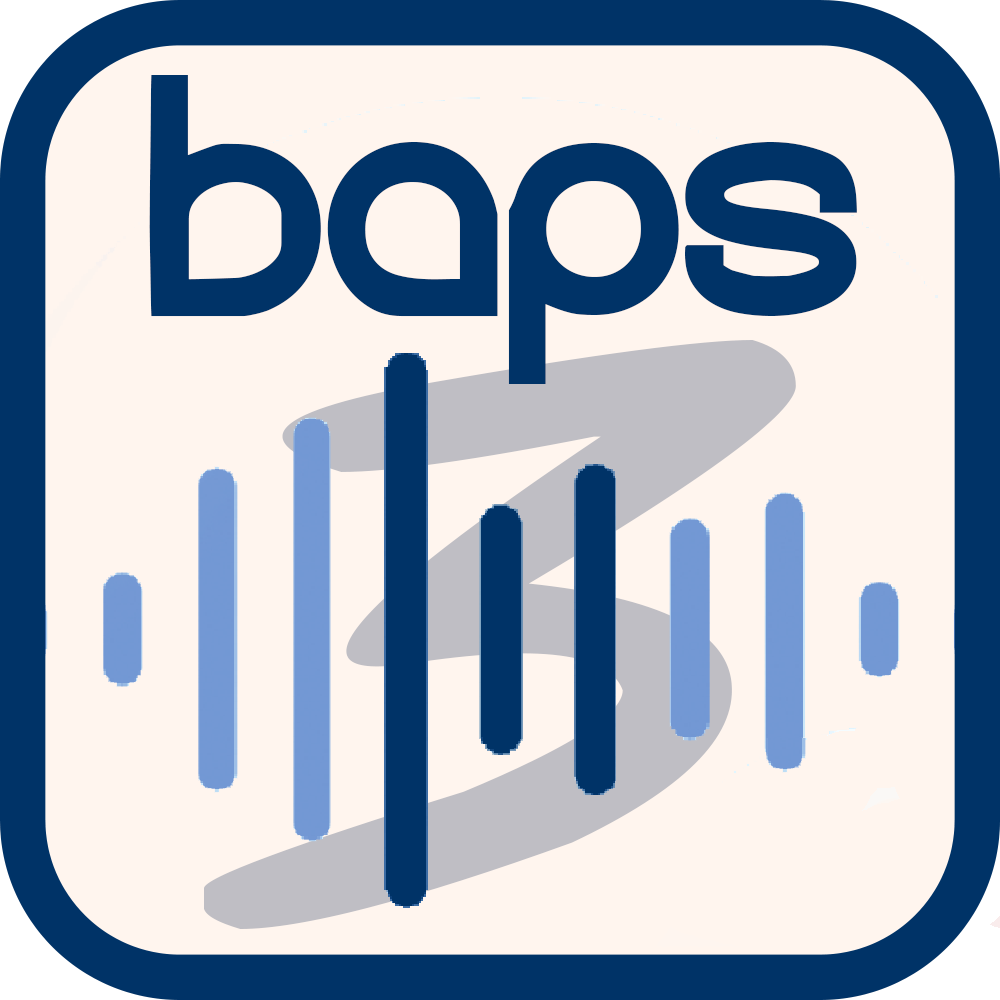
<style>
.page{position:relative;width:1000px;height:1000px;background:#fff5ee}
.page>*{position:absolute;margin:0}
.t1{font:242.8px "roundabout";color:#003367}
.t2{font:716.2px "AbjectFailure";letter-spacing:-0.1em;color:#bfbec4;scale:1.42 1}
</style>
<div class="page">
<p class="t1" style="left:149px;top:75px;width:708px;height:309px">BAPS</p>
<p class="t2" style="left:204px;top:340px;width:592px;height:589px">3</p>
</div>
